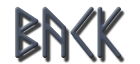
<style>
.page{position:relative;width:140px;height:64px;background:#ffffff}
.page>*{position:absolute;margin:0}
.t1{font:64px "ComicRunes";color:#4a5363}
</style>
<div class="page">
<p class="t1" style="left:15px;top:6px;width:106px;height:52px">BACK</p>
</div>
